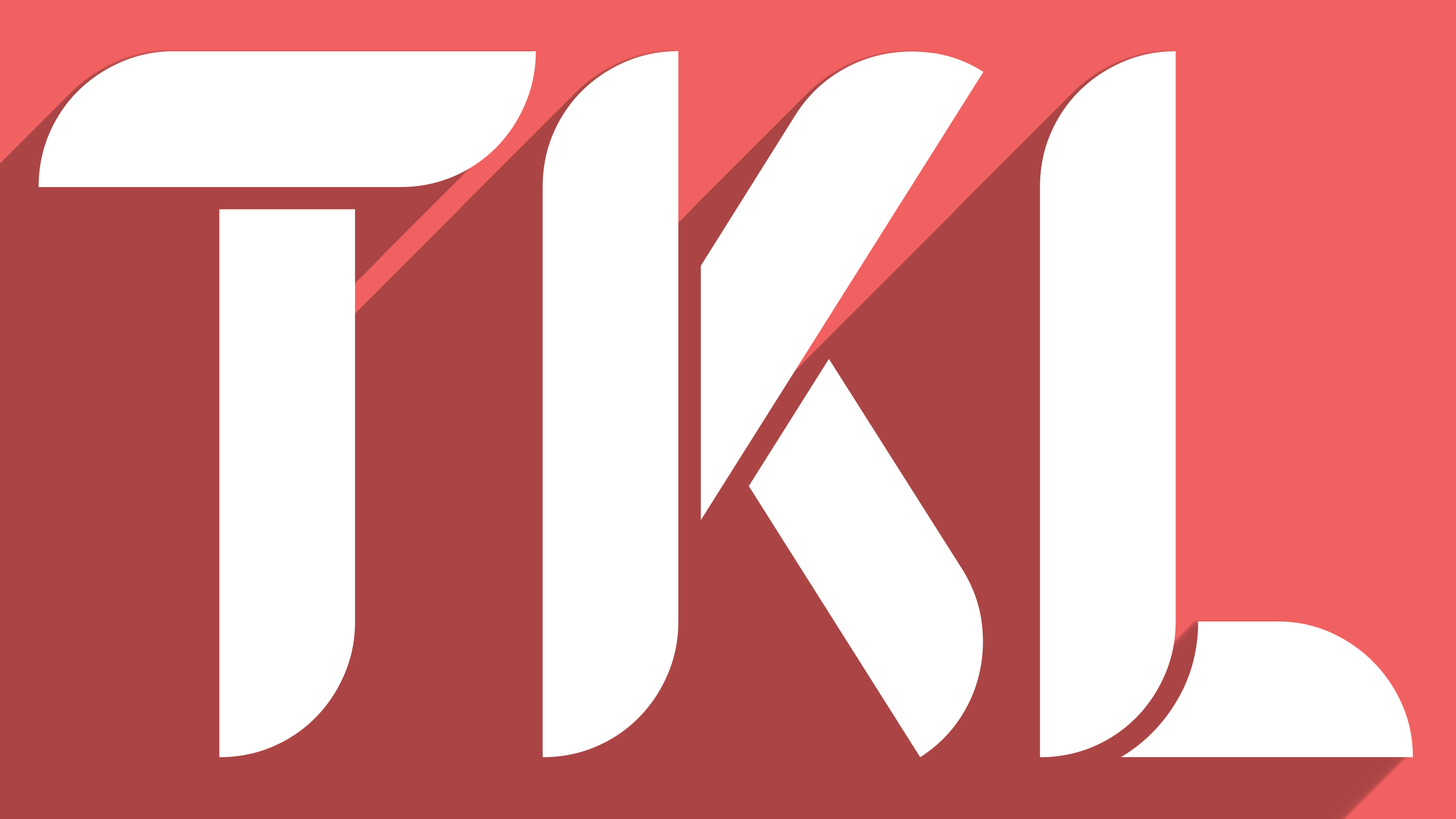
<style>
.page{position:relative;width:1456px;height:819px;background:#ab4545}
.page>*{position:absolute;margin:0}
.t1{font:941.1px "DEBROSEE";color:#ffffff}
</style>
<div class="page">
<p class="t1" style="left:38px;top:51px;width:1375px;height:706px">TKL</p>
</div>
